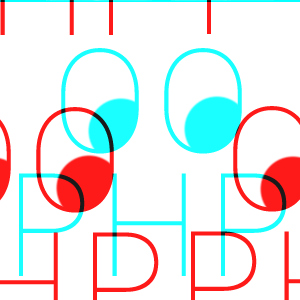
<style>
.page{position:relative;width:300px;height:300px;background:#ffffff}
.page>*{position:absolute;margin:0}
.t1{font:144px "Roboto-Thin";letter-spacing:0.05em}
</style>
<div class="page">
<p class="t1" style="left:19px;top:171px;width:268px;height:103px">PHP</p>
</div>
